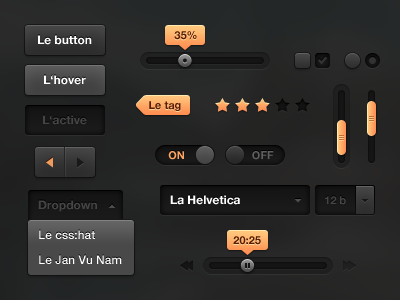
<style>
.page{position:relative;width:400px;height:300px}
.page>*{position:absolute;margin:0}
.t1{font:12px "HelveticaNeue-Bold";color:#ffffff}
.t2{font:11px "HelveticaNeue-Bold";color:#581b00}
.t3{font:12px "HelveticaNeue-Bold";color:#454545}
.t4{font:11px "HelveticaNeue-Bold";color:#ffa563}
.t5{font:11px "HelveticaNeue-Bold";color:#5f5f5f}
.t6{font:11px "HelveticaNeue-Bold";color:#454545}
.t7{font:12px/25px "HelveticaNeue-Medium";color:#ffffff}
</style>
<div class="page">
<p class="t1" style="left:38px;top:35px;width:54px;height:10px">Le button</p>
<p class="t2" style="left:174px;top:31px;width:23px;height:9px">35%</p>
<p class="t1" style="left:44px;top:75px;width:42px;height:10px">L‘hover</p>
<p class="t2" style="left:149px;top:101px;width:32px;height:10px">Le tag</p>
<p class="t3" style="left:43px;top:115px;width:44px;height:10px">L‘active</p>
<p class="t4" style="left:168px;top:151px;width:16px;height:9px">ON</p>
<p class="t5" style="left:252px;top:151px;width:22px;height:9px">OFF</p>
<p class="t1" style="left:170px;top:195px;width:70px;height:10px">La Helvetica</p>
<p class="t6" style="left:325px;top:196px;width:21px;height:9px">12 b</p>
<p class="t3" style="left:38px;top:200px;width:59px;height:12px">Dropdown</p>
<p class="t7" style="left:39px;top:230px;width:83px;height:34px">Le css:hat<br>Le Jan Vu Nam</p>
<p class="t2" style="left:233px;top:236px;width:28px;height:9px">20:25</p>
</div>
